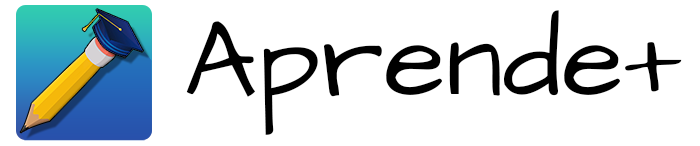
<style>
.page{position:relative;width:700px;height:146px;background:#ffffff}
.page>*{position:absolute;margin:0}
.t1{font:107.6px "ArchitectsDaughter-Regular";color:#000000;scale:1.06 1}
</style>
<div class="page">
<p class="t1" style="left:186px;top:10px;width:496px;height:125px">Aprende+</p>
</div>
